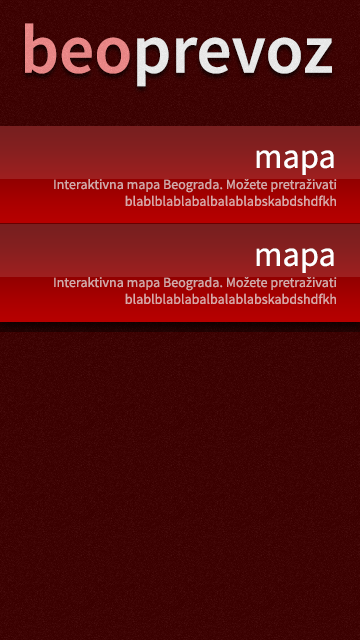
<style>
.page{position:relative;width:360px;height:640px}
.page>*{position:absolute;margin:0}
.t1{font:69.5px "SourceSansPro-Semibold";color:#ffffff}
.t2{font:69.5px "SourceSansPro-Semibold";color:#ff9292}
.t3{font:34.7px "SourceSansPro-Regular";color:#ffffff}
.t4{font:14px "SourceSansPro-Regular";color:#d4a9a9}
</style>
<div class="page">
<p class="t1" style="left:25px;top:23px;width:307px;height:64px"><span class="t2">beo</span>prevoz</p>
<p class="t3" style="left:256px;top:150px;width:78px;height:25px">mapa</p>
<p class="t4" style="left:54px;top:179px;width:283px;height:27px;text-align:right">Interaktivna mapa Beograda. Možete pretraživati<br>blablblablabalbalablabskabdshdfkh</p>
<p class="t3" style="left:256px;top:248px;width:78px;height:25px">mapa</p>
<p class="t4" style="left:54px;top:277px;width:283px;height:27px;text-align:right">Interaktivna mapa Beograda. Možete pretraživati<br>blablblablabalbalablabskabdshdfkh</p>
</div>
